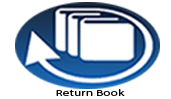
<style>
.page{position:relative;width:171px;height:99px;background:#ffffff}
.page>*{position:absolute;margin:0}
.t1{font:8.8px "MyriadPro-Regular";color:#000000;scale:1.52 1}
</style>
<div class="page">
<p class="t1" style="left:56px;top:89px;width:69px;height:7px">Return Book</p>
</div>
